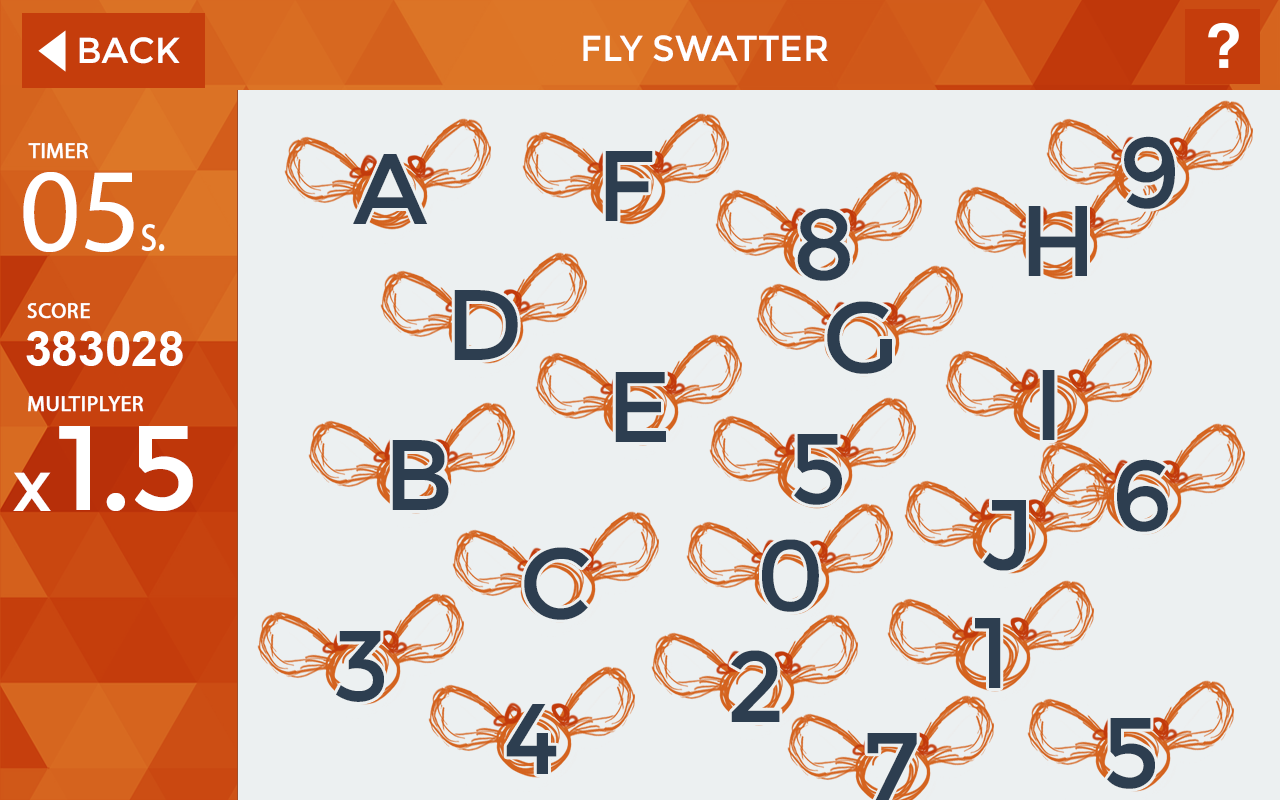
<style>
.page{position:relative;width:1280px;height:800px;background:#ecf0f1}
.page>*{position:absolute;margin:0}
.t1{font:36px "Montserrat-Regular";color:#ffffff}
.t2{font:36px "Montserrat-Regular";color:#ffffff;text-transform:uppercase}
.t3{font:100px "Montserrat-Regular";letter-spacing:0.54em;color:#2d3e50;text-transform:uppercase}
.t4{font:22px "MyriadPro-Regular";color:#ffffff;font-weight:bold}
.t5{font:120px "MyriadPro-Regular";color:#ffffff}
.t6{font:55px "MyriadPro-Regular";color:#ffffff;scale:0.8 1}
.t7{font:48px "Arial-BoldMT";color:#ffffff}
.t8{font:120px "Montserrat-Regular";letter-spacing:-0.025em;color:#ffffff}
.t9{font:72px "Montserrat-Regular";color:#ffffff}
</style>
<div class="page">
<p class="t1" style="left:79px;top:37px;width:101px;height:27px">BACK</p>
<p class="t2" style="left:583px;top:35px;width:245px;height:27px">Fly Swatter</p>
<p class="t3" style="left:1124px;top:136px;width:51px;height:73px">9</p>
<p class="t4" style="left:28px;top:143px;width:60px;height:16px">TIMER</p>
<p class="t3" style="left:353px;top:154px;width:75px;height:70px">a</p>
<p class="t3" style="left:605px;top:151px;width:48px;height:70px">f</p>
<p class="t5" style="left:23px;top:172px;width:111px;height:80px">05</p>
<p class="t3" style="left:797px;top:208px;width:53px;height:73px">8</p>
<p class="t3" style="left:1028px;top:206px;width:59px;height:70px">h</p>
<p class="t6" style="left:141px;top:224px;width:24px;height:27px">s.</p>
<p class="t3" style="left:454px;top:290px;width:64px;height:70px">d</p>
<p class="t4" style="left:27px;top:303px;width:63px;height:16px">SCORE</p>
<p class="t3" style="left:827px;top:301px;width:65px;height:73px">g</p>
<p class="t7" style="left:26px;top:331px;width:157px;height:35px">383028</p>
<p class="t3" style="left:615px;top:372px;width:51px;height:70px">e</p>
<p class="t3" style="left:1042px;top:370px;width:13px;height:70px">i</p>
<p class="t4" style="left:28px;top:396px;width:116px;height:16px">MULTIPLYER</p>
<p class="t8" style="left:59px;top:426px;width:134px;height:85px">1.5</p>
<p class="t3" style="left:794px;top:434px;width:48px;height:71px">5</p>
<p class="t3" style="left:392px;top:440px;width:57px;height:70px">b</p>
<p class="t3" style="left:1117px;top:459px;width:51px;height:73px">6</p>
<p class="t9" style="left:13px;top:472px;width:38px;height:39px">x</p>
<p class="t3" style="left:983px;top:500px;width:43px;height:71px">J</p>
<p class="t3" style="left:762px;top:539px;width:57px;height:73px">0</p>
<p class="t3" style="left:524px;top:547px;width:65px;height:73px">C</p>
<p class="t3" style="left:975px;top:618px;width:26px;height:70px">1</p>
<p class="t3" style="left:336px;top:631px;width:48px;height:71px">3</p>
<p class="t3" style="left:731px;top:650px;width:49px;height:72px">2</p>
<p class="t3" style="left:506px;top:704px;width:51px;height:70px">4</p>
<p class="t3" style="left:1107px;top:718px;width:48px;height:71px">5</p>
</div>
